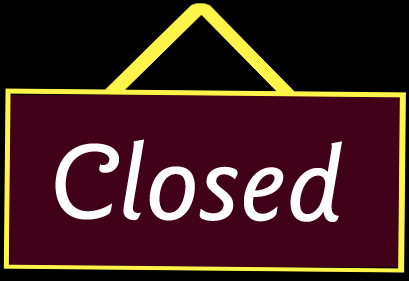
<style>
.page{position:relative;width:409px;height:281px;background:#410119}
.page>*{position:absolute;margin:0}
.t1{font:111.4px "GoudySans-MediumItalic";letter-spacing:0.01em;color:#ffffff}
</style>
<div class="page">
<p class="t1" style="left:55px;top:139px;width:287px;height:83px;rotate:1deg">Closed</p>
</div>
